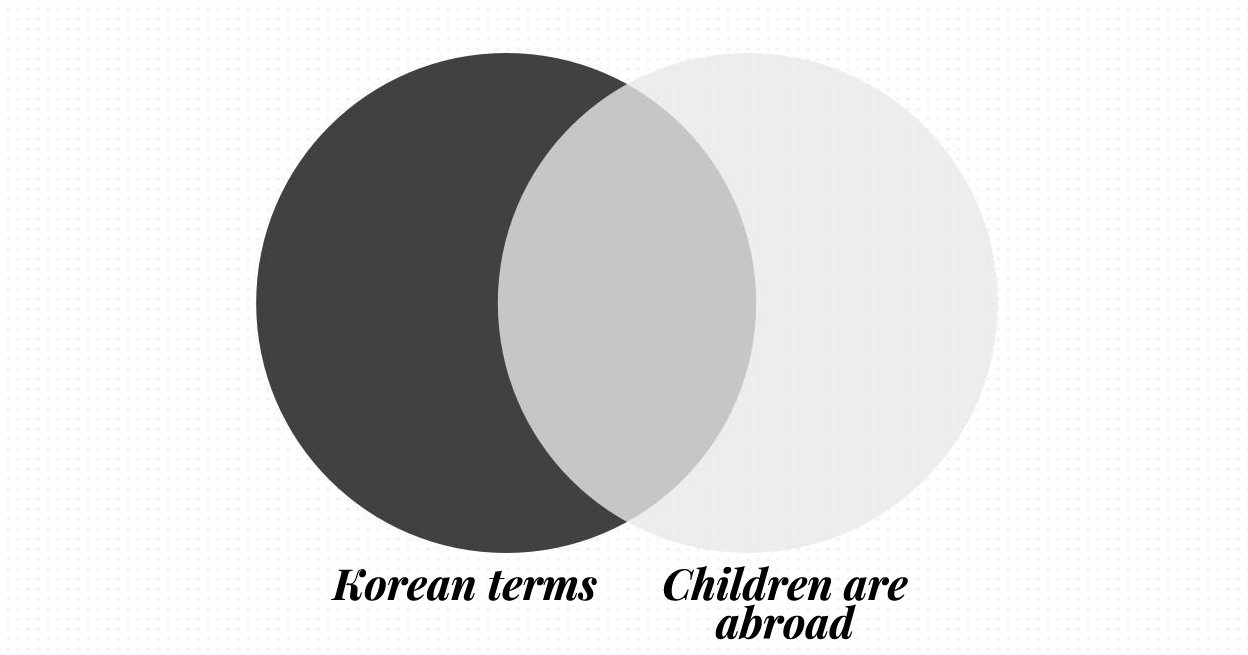
<style>
.page{position:relative;width:1248px;height:655px;background:#ffffff}
.page>*{position:absolute;margin:0}
.t1{font:42.6px "PlayfairDisplay-BoldItalic";color:#000000}
.t2{font:42.6px/38.5px "PlayfairDisplay-BoldItalic";color:#000000}
</style>
<div class="page">
<p class="t1" style="left:331px;top:569px;width:266px;height:32px">Korean terms</p>
<p class="t2" style="left:663px;top:566px;width:245px;height:74px;text-align:center">Children are abroad</p>
</div>
